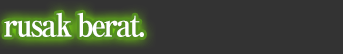
<style>
.page{position:relative;width:343px;height:54px;background:#333333}
.page>*{position:absolute;margin:0}
.t1{font:32px "RyuminPro-ExBold";letter-spacing:-0.08em;color:#ffffff;scale:0.9 1}
</style>
<div class="page">
<p class="t1" style="left:4px;top:12px;width:140px;height:25px">rusak berat.</p>
</div>
